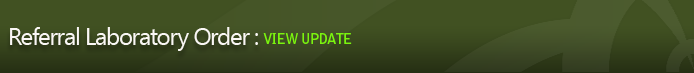
<style>
.page{position:relative;width:694px;height:73px;background:#415122}
.page>*{position:absolute;margin:0}
.t1{font:24px "SegoeUI";letter-spacing:-0.05em;color:#faf7f5}
.t2{font:14px "BellGothicStd-Bold";letter-spacing:-0.05em;color:#7af40e}
</style>
<div class="page">
<p class="t1" style="left:10px;top:27px;width:248px;height:24px">Referral Laboratory Order :</p>
<p class="t2" style="left:263px;top:33px;width:89px;height:11px">VIEW UPDATE</p>
</div>
